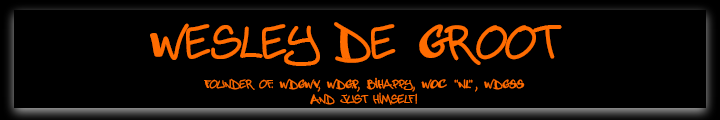
<style>
.page{position:relative;width:720px;height:120px;background:#000000}
.page>*{position:absolute;margin:0}
.t1{font:48px "Abuse";color:#ff6c00}
.t2{font:12px "Abuse";color:#ff6c00}
</style>
<div class="page">
<p class="t1" style="left:150px;top:22px;width:412px;height:44px">Wesley De Groot</p>
<p class="t2" style="left:204px;top:77px;width:321px;height:28px;text-align:center">Founder of: WDGWV, WDG.P, BIHappy, WOC "NL", WDGSS<br>And just himself!</p>
</div>
